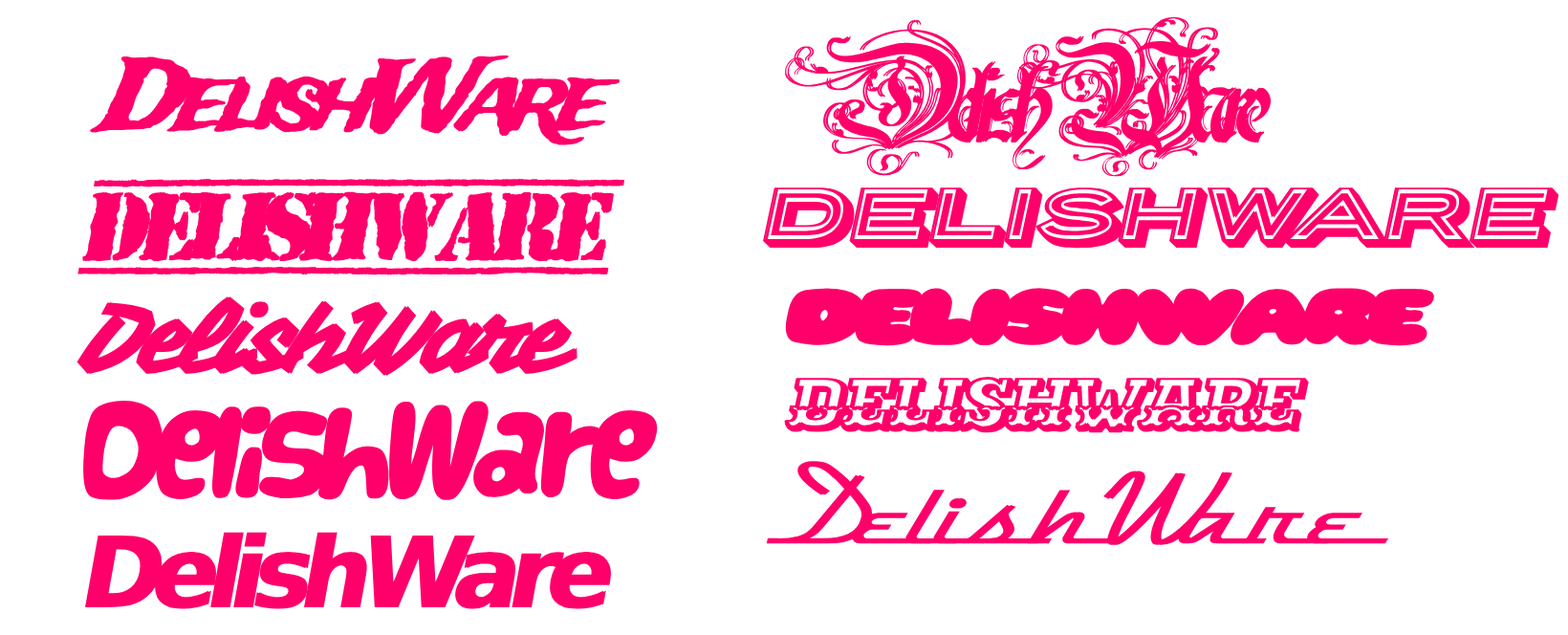
<style>
.page{position:relative;width:1568px;height:635px;background:#ffffff}
.page>*{position:absolute;margin:0}
.t1{font:98.5px "RothenburgDecorative-Normal";letter-spacing:-0.133em;color:#ff006b;font-weight:bold;font-style:italic}
.t2{font:98.5px "TopSecret-Bold";letter-spacing:-0.133em;color:#ff006b;font-weight:bold;font-style:italic}
.t3{font:70.8px "PorterSansBlock";letter-spacing:-0.133em;color:#ff006b;font-weight:bold;font-style:italic;scale:1.17 1}
.t4{font:70.8px "Pleasantly-Plump";letter-spacing:-0.133em;color:#ff006b;font-weight:bold;font-style:italic;scale:1.17 1}
.t5{font:98.5px "VampiroOne-Regular";letter-spacing:-0.133em;color:#ff006b;font-weight:bold;font-style:italic}
.t6{font:70.8px "Ewert-Regular";letter-spacing:-0.133em;color:#ff006b;font-weight:bold;font-style:italic;scale:1.17 1}
.t7{font:98.5px "Vanilla";letter-spacing:-0.133em;color:#ff006b;font-weight:bold;font-style:italic}
.t8{font:113px "DymaxionScript";letter-spacing:-0.133em;color:#ff006b;font-weight:bold;font-style:italic;scale:1.29 1}
.t9{font:98.5px "DejaVuSans-Bold";letter-spacing:-0.133em;color:#ff006b;font-weight:bold;font-style:italic}
</style>
<div class="page">
<p class="t1" style="left:784px;top:17px;width:488px;height:160px">DelishWare</p>
<p class="t2" style="left:77px;top:178px;width:548px;height:97px">DelishWare</p>
<p class="t3" style="left:763px;top:187px;width:796px;height:62px">DelishWare</p>
<p class="t4" style="left:784px;top:288px;width:651px;height:58px">DelishWare</p>
<p class="t5" style="left:76px;top:296px;width:501px;height:80px">DelishWare</p>
<p class="t6" style="left:784px;top:377px;width:525px;height:56px">DelishWare</p>
<p class="t7" style="left:80px;top:400px;width:580px;height:101px">DelishWare</p>
<p class="t8" style="left:766px;top:461px;width:623px;height:84px">DelishWare</p>
<p class="t9" style="left:85px;top:532px;width:528px;height:77px">DelishWare</p>
</div>
